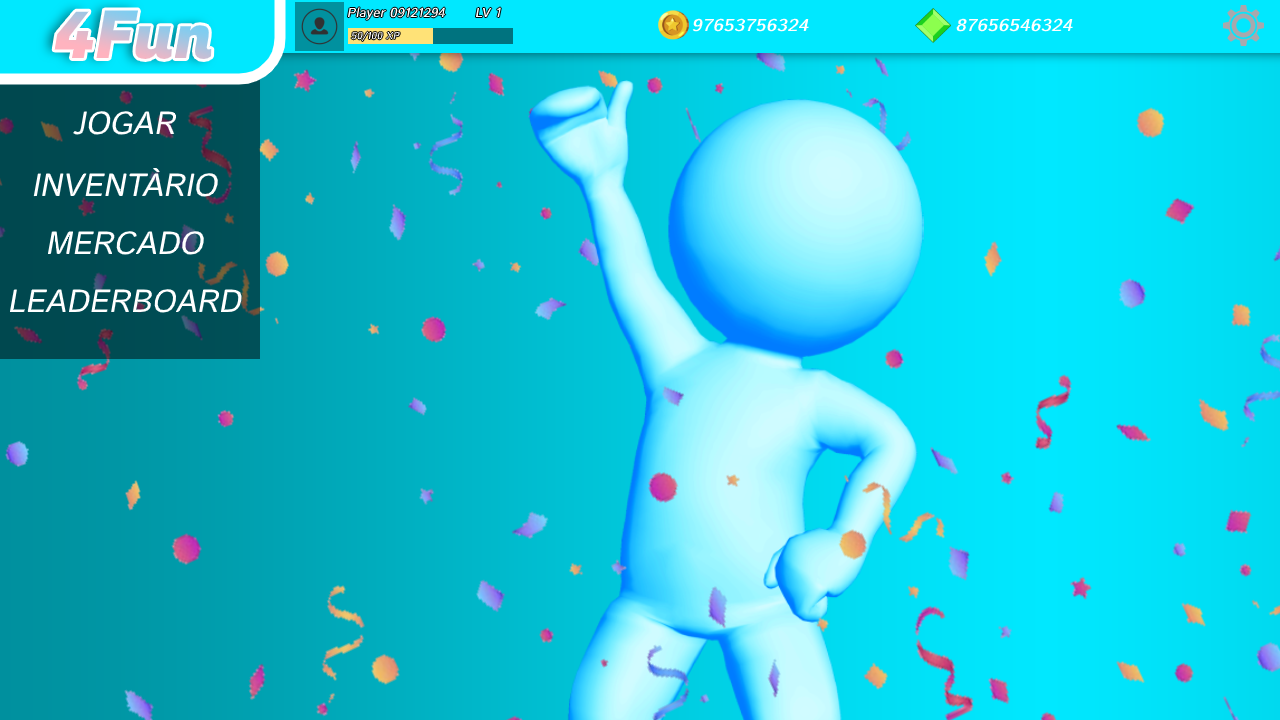
<style>
.page{position:relative;width:1280px;height:720px}
.page>*{position:absolute;margin:0}
.t1{font:66px "FugazOne-Regular"}
.t2{font:13px "IstokWeb-Regular";color:#ffffff;font-weight:bold;font-style:italic}
.t3{font:17.1px "IstokWeb-Regular";color:#ffffff;font-weight:bold;font-style:italic;scale:1.09 1}
.t4{font:10px "IstokWeb-Regular";color:#ffffff;font-weight:bold;font-style:italic}
.t5{font:32px "IstokWeb-Regular";color:#ffffff;font-style:italic}
</style>
<div class="page">
<p class="t1" style="left:54px;top:10px;width:158px;height:49px">4Fun</p>
<p class="t2" style="left:347px;top:7px;width:154px;height:13px">Player 09121294      LV 1</p>
<p class="t3" style="left:692px;top:18px;width:117px;height:14px">97653756324</p>
<p class="t3" style="left:956px;top:18px;width:117px;height:14px">87656546324</p>
<p class="t4" style="left:351px;top:31px;width:49px;height:11px">50/100 XP</p>
<p class="t5" style="left:73px;top:111px;width:104px;height:24px">JOGAR</p>
<p class="t5" style="left:33px;top:168px;width:186px;height:29px">INVENTÀRIO</p>
<p class="t5" style="left:47px;top:231px;width:158px;height:24px">MERCADO</p>
<p class="t5" style="left:9px;top:289px;width:234px;height:24px">LEADERBOARD</p>
</div>
